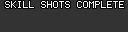
<style>
.page{position:relative;width:128px;height:32px;background:#333333}
.page>*{position:absolute;margin:0}
.t1{font:8px "Terminal";color:#fefefe}
</style>
<div class="page">
<p class="t1" style="left:5px;top:1px;width:119px;height:7px">SKILL SHOTS COMPLETE</p>
</div>
